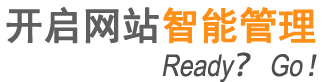
<style>
.page{position:relative;width:322px;height:82px;background:#ffffff}
.page>*{position:absolute;margin:0}
.t1{font:38px "SimHei";color:#605e5e;text-transform:uppercase;font-weight:bold}
.t2{font:38px "SimHei";color:#ff8f16;text-transform:uppercase;font-weight:bold}
.t3{font:30px "ArialNarrow";color:#4e4c4c;font-style:italic}
.t4{font:30px "AdobeHeitiStd-Regular";color:#4e4c4c;font-style:italic}
.t5{font:30px "SimHei";color:#4e4c4c;font-style:italic}
</style>
<div class="page">
<p class="t1" style="left:6px;top:6px;width:310px;height:38px">开启网站<span class="t2">智能管理</span></p>
<p class="t3" style="left:162px;top:52px;width:155px;height:31px">Ready<span class="t4">？</span> Go<span class="t5">！</span></p>
</div>
